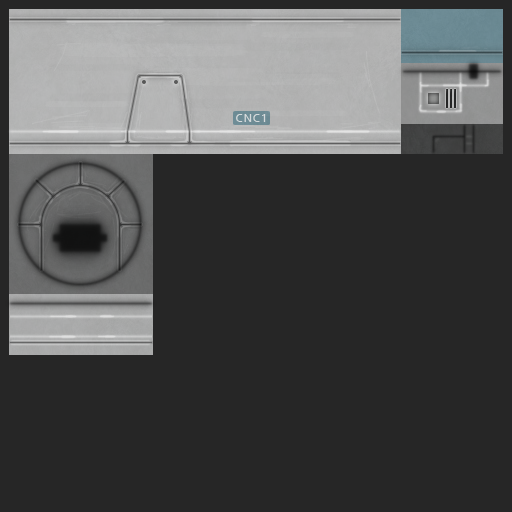
<style>
.page{position:relative;width:512px;height:512px;background:#262626}
.page>*{position:absolute;margin:0}
.t1{font:11px "SegoeUI";letter-spacing:0.1em;color:#d5dadc}
</style>
<div class="page">
<p class="t1" style="left:236px;top:114px;width:30px;height:8px">CNC1</p>
</div>
